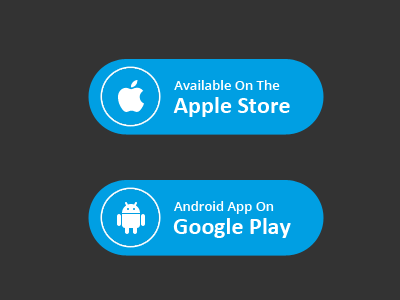
<style>
.page{position:relative;width:400px;height:300px;background:#333333}
.page>*{position:absolute;margin:0}
.t1{font:13px "OpenSans-Semibold";color:#ffffff}
.t2{font:24px "Calibri-Bold";color:#ffffff}
</style>
<div class="page">
<p class="t1" style="left:174px;top:80px;width:106px;height:10px">Available On The</p>
<p class="t2" style="left:173px;top:97px;width:117px;height:20px">Apple Store</p>
<p class="t1" style="left:174px;top:201px;width:100px;height:13px">Android App On</p>
<p class="t2" style="left:173px;top:218px;width:118px;height:20px">Google Play</p>
</div>
